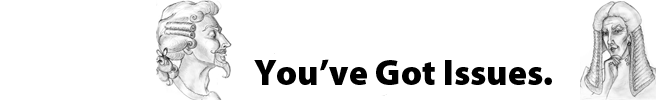
<style>
.page{position:relative;width:656px;height:100px;background:#ffffff}
.page>*{position:absolute;margin:0}
.t1{font:36px "MyriadPro-Black";color:#000000}
</style>
<div class="page">
<p class="t1" style="left:254px;top:59px;width:298px;height:26px">You’ve Got Issues.</p>
</div>
